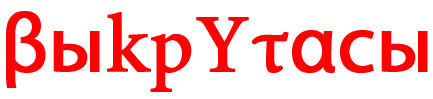
<style>
.page{position:relative;width:433px;height:99px;background:#ffffff}
.page>*{position:absolute;margin:0}
.t1{font:83px "MinionPro-Regular";color:#ff0000;font-weight:bold}
.t2{font:83px "MyriadPro-Regular";color:#ff0000;font-weight:bold}
</style>
<div class="page">
<p class="t1" style="left:6px;top:11px;width:422px;height:81px"><span class="t2">βы</span>kрYτ<span class="t2">αcы</span></p>
</div>
